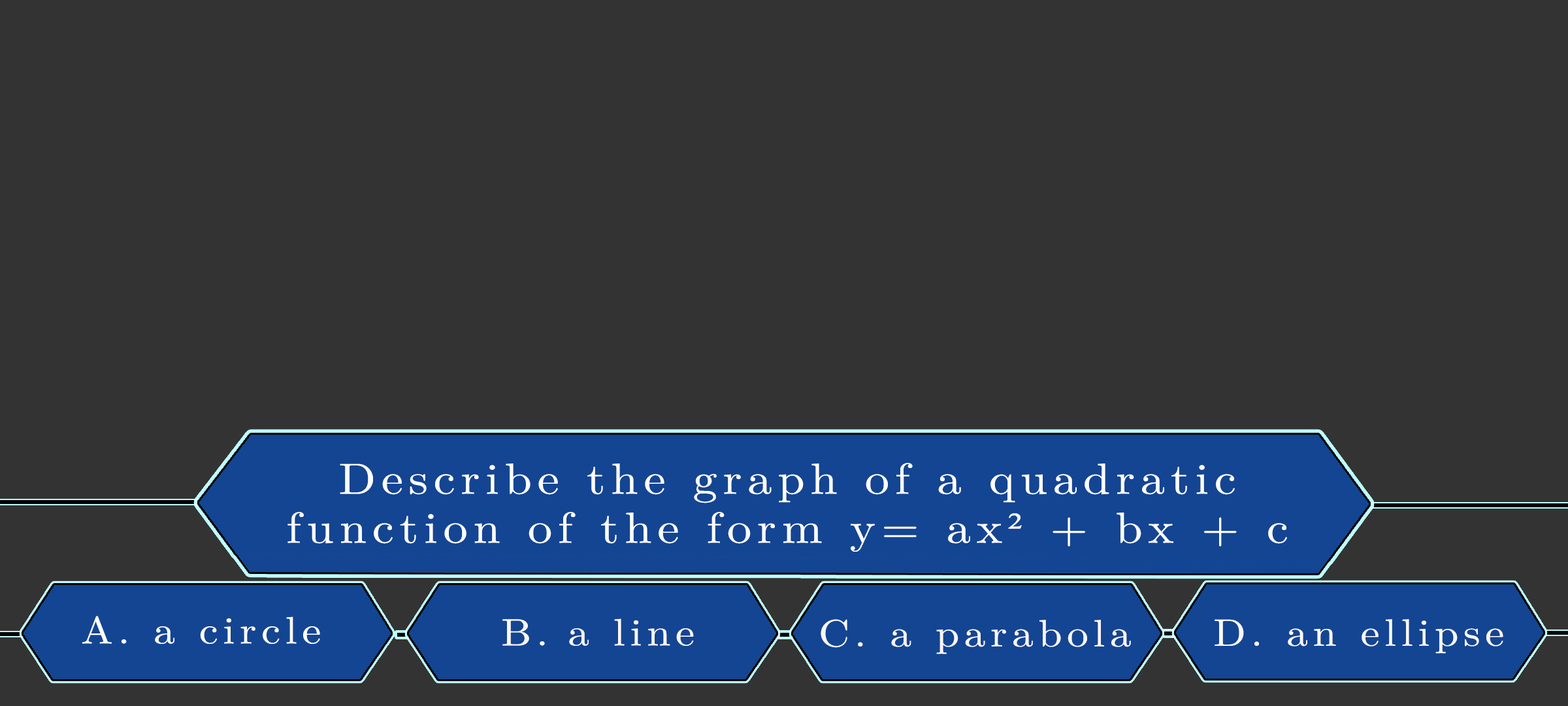
<style>
.page{position:relative;width:1568px;height:706px;background:#333333}
.page>*{position:absolute;margin:0}
.t1{font:43.6px/49px "LatinModernMath-Regular";letter-spacing:0.115em;color:#ffffff;scale:1.12 1}
.t2{font:43.6px/49px "TimesNewRomanPSMT";letter-spacing:0.115em;color:#ffffff;scale:1.12 1}
.t3{font:38.1px "LatinModernMath-Regular";letter-spacing:0.115em;color:#fffefe;scale:1.12 1}
.t4{font:38.1px "LatinModernMath-Regular";letter-spacing:0.115em;color:#fdf9f9;scale:1.12 1}
.t5{font:38.1px "LatinModernMath-Regular";letter-spacing:0.115em;color:#fdf9f9;text-transform:uppercase;scale:1.12 1}
.t6{font:38.1px "LatinModernMath-Regular";letter-spacing:0.115em;color:#fcf7f7;scale:1.12 1}
.t7{font:38.1px "LatinModernMath-Regular";letter-spacing:0.115em;color:#fcf7f7;text-transform:uppercase;scale:1.12 1}
.t8{font:38.1px "LatinModernMath-Regular";letter-spacing:0.115em;color:#fbf8f8;scale:1.12 1}
.t9{font:38.1px "LatinModernMath-Regular";letter-spacing:0.115em;color:#fbf8f8;text-transform:uppercase;scale:1.12 1}
</style>
<div class="page">
<p class="t1" style="left:287px;top:463px;width:1000px;height:88px;text-align:center">Describe the graph of a quadratic<br>function of the form y= ax<span class="t2">²</span> + bx + c</p>
<p class="t3" style="left:82px;top:615px;width:238px;height:29px">A. a circle</p>
<p class="t4" style="left:502px;top:618px;width:192px;height:27px"><span class="t5">b. </span>a line</p>
<p class="t6" style="left:821px;top:619px;width:310px;height:35px"><span class="t7">c. </span>a parabola</p>
<p class="t8" style="left:1215px;top:619px;width:288px;height:34px"><span class="t9">d. </span>an ellipse</p>
</div>
